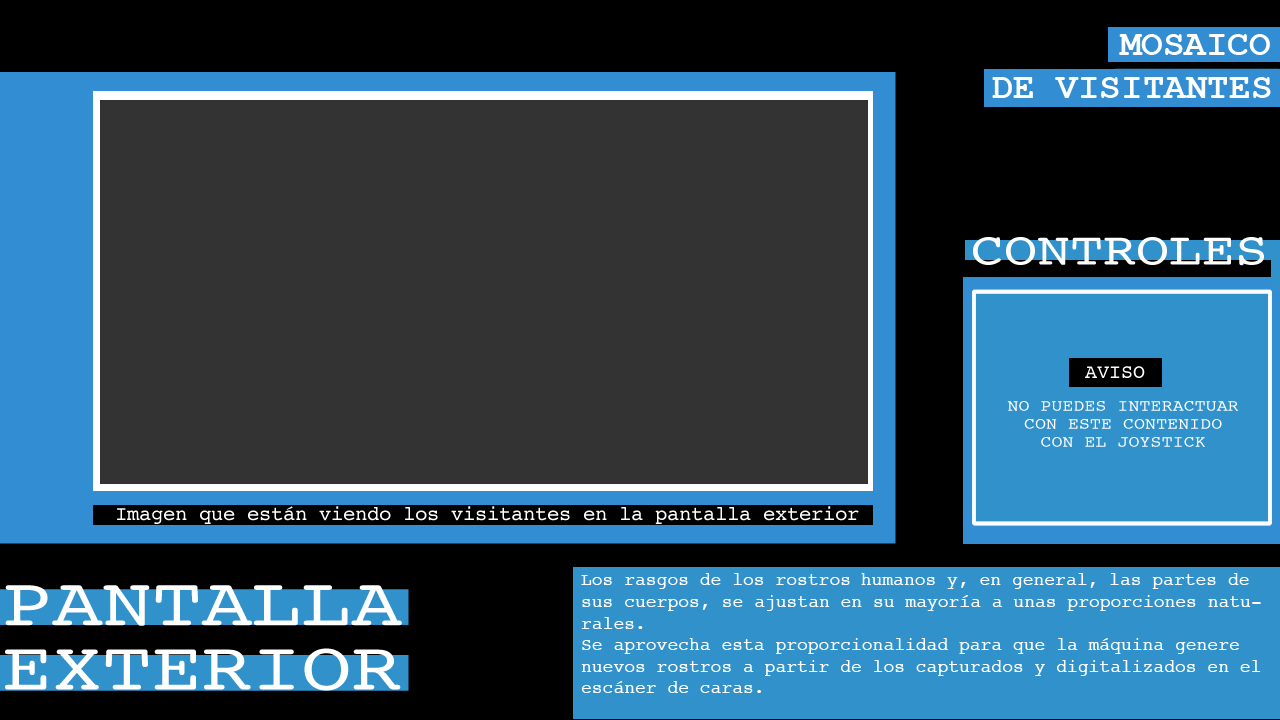
<style>
.page{position:relative;width:1280px;height:720px;background:#333333}
.page>*{position:absolute;margin:0}
.t1{font:36px "CourierNewPS-BoldMT";color:#ffffff}
.t2{font:18px "Courier";color:#ffffff}
</style>
<div class="page">
<p class="t1" style="left:1119px;top:34px;width:151px;height:21px">MOSAICO</p>
<p class="t1" style="left:992px;top:77px;width:279px;height:21px">DE VISITANTES</p>
<p class="t2" style="left:581px;top:573px;width:680px;height:120px">Los rasgos de los rostros humanos y, en general, las partes de sus cuerpos, se ajustan en su mayoría a unas proporciones naturales.<br>Se aprovecha esta proporcionalidad para que la máquina genere nuevos rostros a partir de los capturados y digitalizados en el escáner de caras.</p>
</div>
